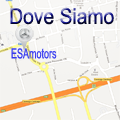
<style>
.page{position:relative;width:120px;height:120px}
.page>*{position:absolute;margin:0}
.t1{font:22px "ArialMT";scale:0.88 1}
.t2{font:13.8px "ArialMT";color:#3f43f0;scale:0.65 1}
</style>
<div class="page">
<p class="t1" style="left:10px;top:7px;width:104px;height:18px">Dove Siamo</p>
<p class="t2" style="left:11px;top:48px;width:46px;height:11px">ESAmotors</p>
</div>
